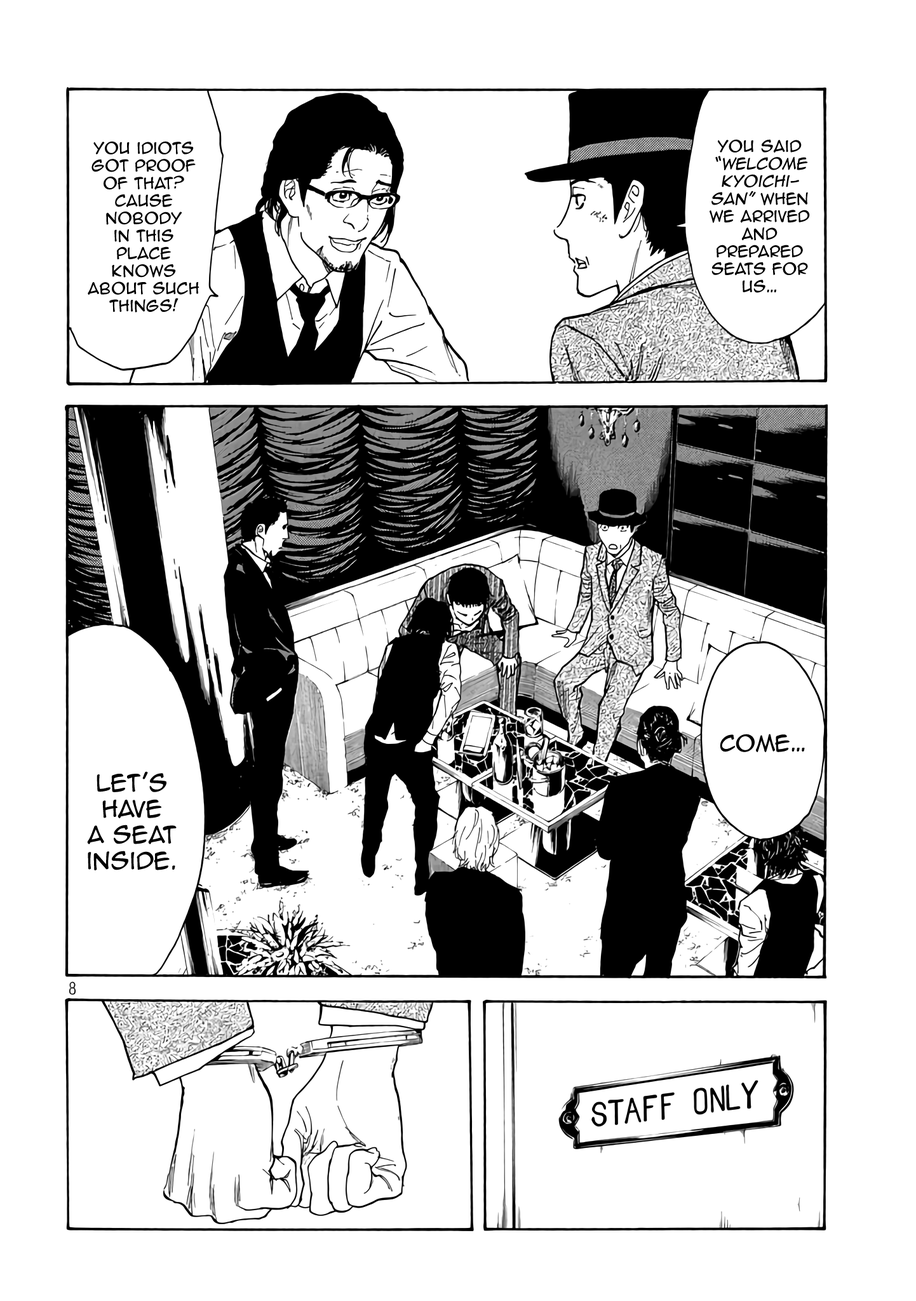
<style>
.page{position:relative;width:916px;height:1301px;background:#ffffff}
.page>*{position:absolute;margin:0}
.t1{font:14.6px "AnimeAce2.0BB";color:#000000}
.t2{font:14.6px "AnimeAce2.0BB";color:#000000;font-style:italic}
.t3{font:20.3px "AnimeAce2.0BB";color:#000000}
.t4{font:21.6px "AnimeAce2.0BB";color:#000000}
</style>
<div class="page">
<p class="t1" style="left:88px;top:141px;width:112px;height:172px;text-align:center">You idiots got proof of that? cause Nobody <br>in this place knows about such things!</p>
<p class="t1" style="left:710px;top:139px;width:100px;height:154px;text-align:center">You said <span class="t2">“Welcome Kyoichi-<br>san”</span> when we arrived and prepared seats for us…</p>
<p class="t3" style="left:720px;top:734px;width:85px;height:18px">Come…</p>
<p class="t4" style="left:87px;top:771px;width:90px;height:100px;text-align:center">let’s have <br>a seat inside.</p>
</div>
